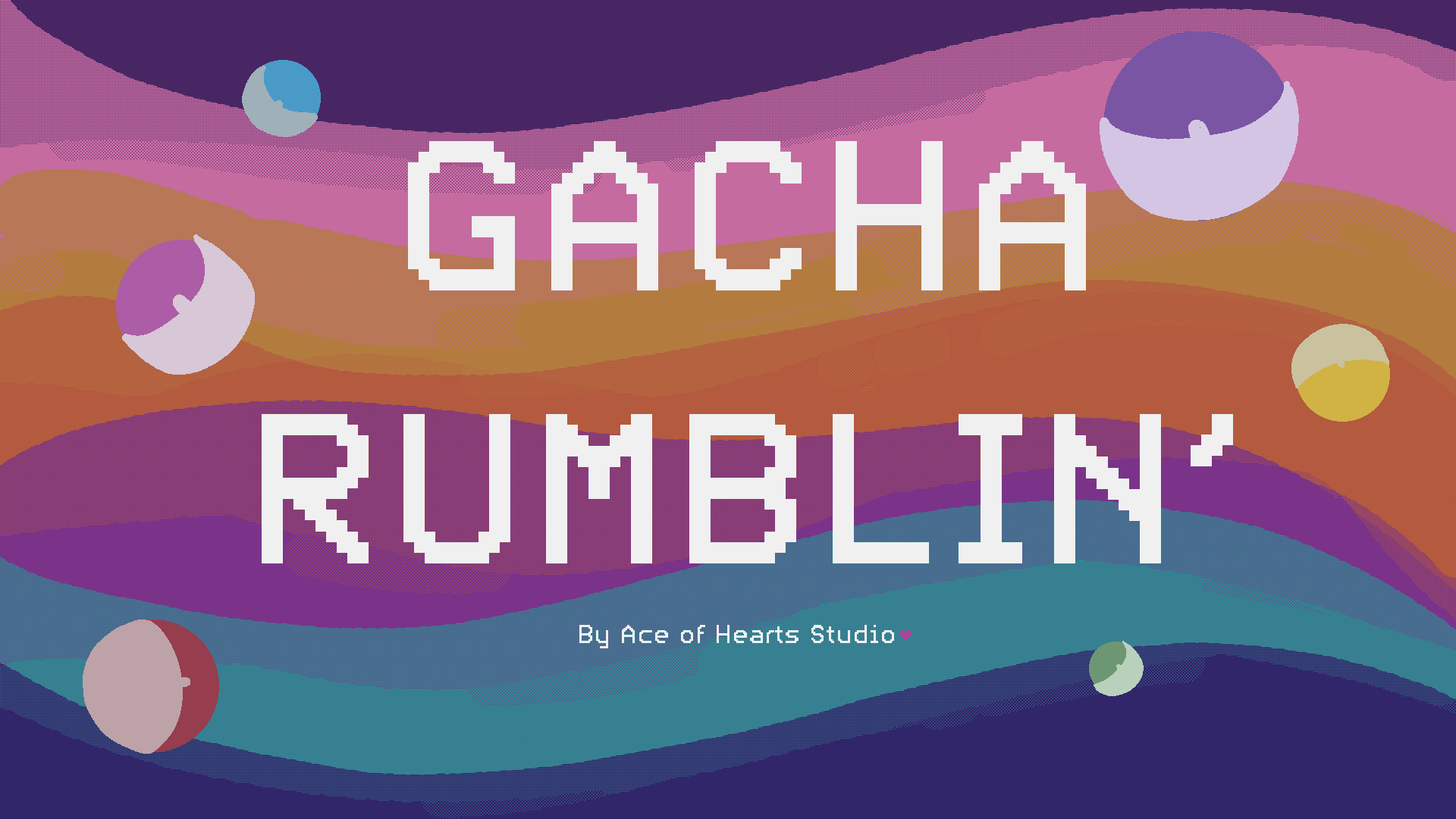
<style>
.page{position:relative;width:1456px;height:819px}
.page>*{position:absolute;margin:0}
.t1{font:227.5px "PFVideotext-Regular";color:#f0f0f0}
.t2{font:27.3px "PFVideotext-Regular";color:#f0f0f0}
</style>
<div class="page">
<p class="t1" style="left:262px;top:141px;width:971px;height:422px;text-align:center">GACHA RUMBLIN’</p>
<p class="t2" style="left:579px;top:625px;width:315px;height:23px">By Ace of Hearts Studio</p>
</div>
